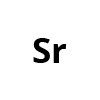
<style>
.page{position:relative;width:100px;height:100px;background:#ffffff}
.page>*{position:absolute;margin:0}
.t1{font:35px "OpenSans-Bold";color:#000000}
</style>
<div class="page">
<p class="t1" style="left:33px;top:38px;width:34px;height:25px">Sr</p>
</div>
